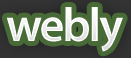
<style>
.page{position:relative;width:131px;height:58px;background:#486a36}
.page>*{position:absolute;margin:0}
.t1{font:48px "MyriadPro-Semibold";letter-spacing:-0.025em;color:#fefefe}
</style>
<div class="page">
<p class="t1" style="left:6px;top:7px;width:117px;height:45px">webly</p>
</div>
